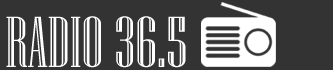
<style>
.page{position:relative;width:333px;height:70px;background:#333333}
.page>*{position:absolute;margin:0}
.t1{font:72px "NiagaraEngraved-Reg";color:#ffffff}
</style>
<div class="page">
<p class="t1" style="left:6px;top:16px;width:180px;height:52px">RADIO 36.5</p>
</div>
